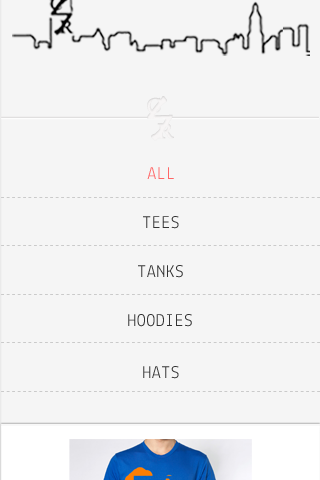
<style>
.page{position:relative;width:320px;height:480px;background:#f5f5f5}
.page>*{position:absolute;margin:0}
.t1{font:18px "Lekton-Regular";letter-spacing:0.025em;color:#ff6666}
.t2{font:10px "Lekton-Regular";letter-spacing:0.025em;scale:1.04 1}
.t3{font:18px "Lekton-Regular";letter-spacing:0.025em;color:#333333}
</style>
<div class="page">
<p class="t1" style="left:147px;top:167px;width:27px;height:12px">ALL</p>
<p class="t2" style="left:1px;top:197px;width:319px;height:1px">-----------------------------------------------------------</p>
<p class="t3" style="left:143px;top:216px;width:36px;height:13px">TEES</p>
<p class="t2" style="left:1px;top:245px;width:319px;height:1px">-----------------------------------------------------------</p>
<p class="t3" style="left:138px;top:265px;width:45px;height:13px">TANKS</p>
<p class="t2" style="left:1px;top:294px;width:319px;height:1px">-----------------------------------------------------------</p>
<p class="t3" style="left:128px;top:314px;width:64px;height:13px">HOODIES</p>
<p class="t2" style="left:1px;top:342px;width:319px;height:1px">-----------------------------------------------------------</p>
<p class="t3" style="left:143px;top:366px;width:36px;height:13px">HATS</p>
<p class="t2" style="left:1px;top:391px;width:319px;height:1px">-----------------------------------------------------------</p>
</div>
